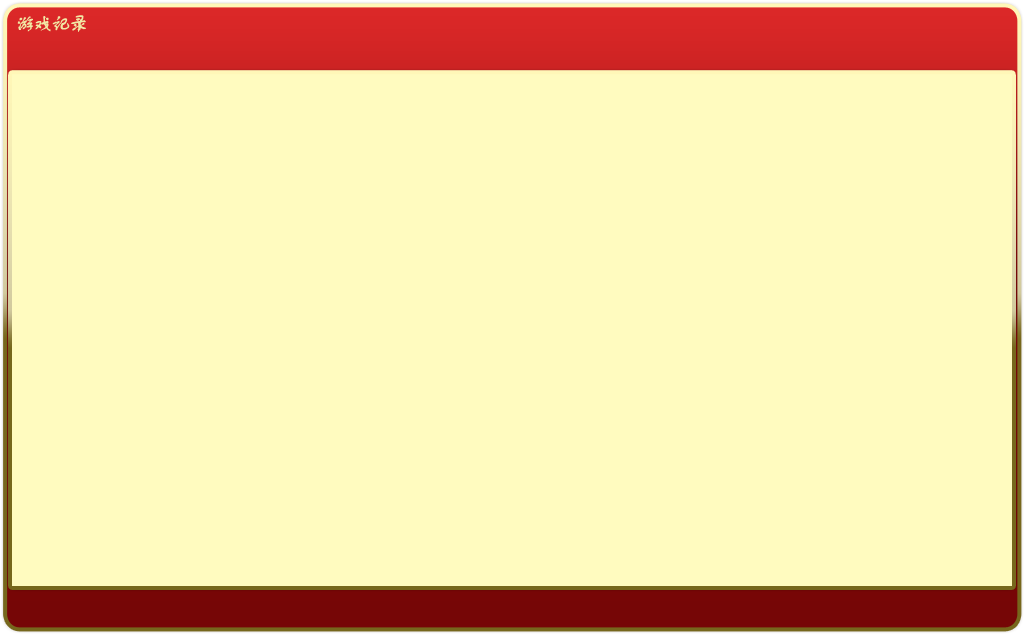
<style>
.page{position:relative;width:1024px;height:635px;background:#fffbbf}
.page>*{position:absolute;margin:0}
.t1{font:20px "FZSTK--GBK1-0";letter-spacing:-0.14em;color:#f1e8a5;font-weight:bold}
</style>
<div class="page">
<p class="t1" style="left:17px;top:15px;width:69px;height:17px">游戏记录</p>
</div>
